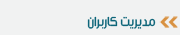
<style>
.page{position:relative;width:180px;height:35px;background:#f1f2f2}
.page>*{position:absolute;margin:0}
.t1{font:14px "Mj_Flow";letter-spacing:-0.001em;color:#0d6579}
</style>
<div class="page">
<p class="t1" style="left:87px;top:16px;width:69px;height:13px">مدیریت کاربران</p>
</div>
